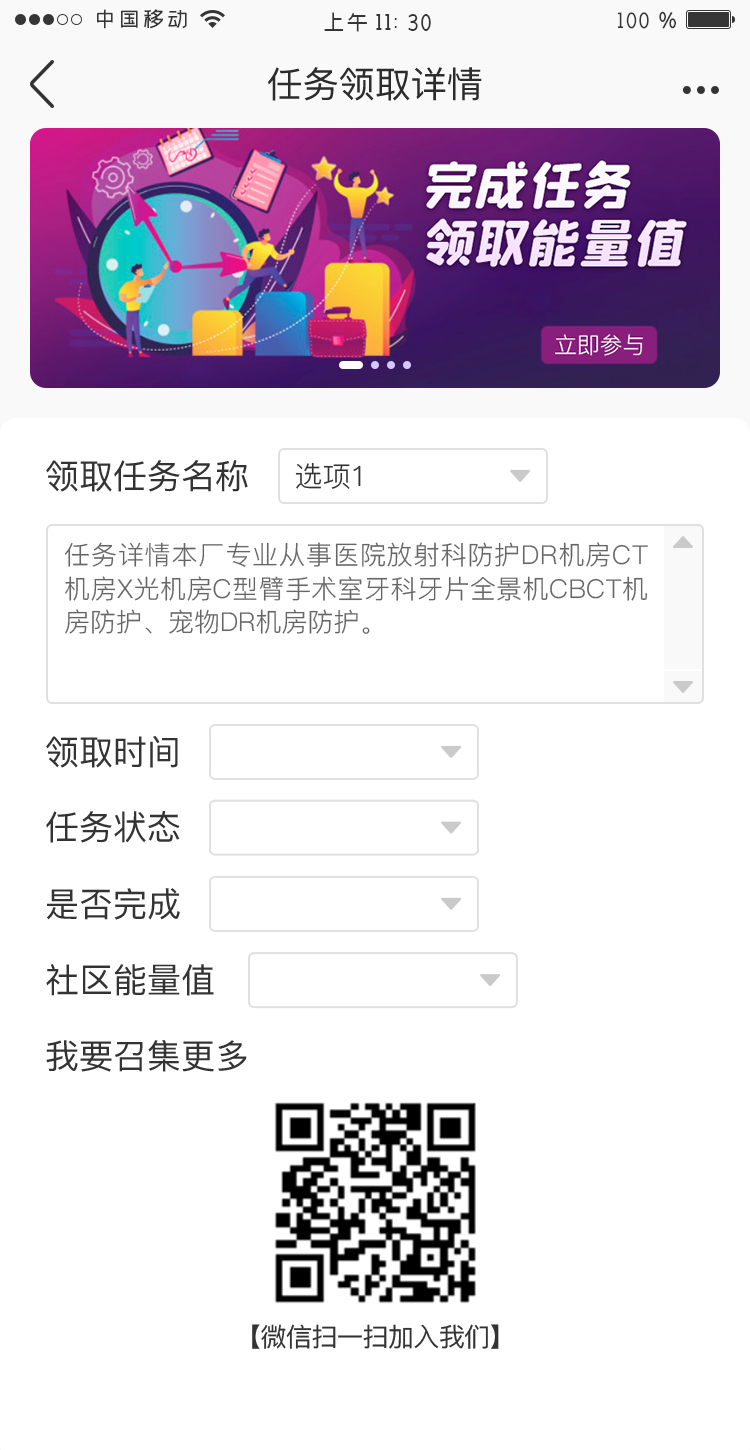
<style>
.page{position:relative;width:750px;height:1450px;background:#ffffff}
.page>*{position:absolute;margin:0}
.t1{font:36px "PingFang-SC-Medium";color:#2c2c2c;text-transform:uppercase}
.t2{font:34px "PingFang-SC-Medium";color:#333333}
.t3{font:28px "PingFang-SC-Regular";color:#333333}
.t4{font:26px/33.6px "PingFang-SC-Regular";color:#666666}
.t5{font:26px "PingFang-SC-Medium";letter-spacing:-0.02em;color:#333333}
</style>
<div class="page">
<p class="t1" style="left:268px;top:67px;width:214px;height:34px">任务领取详情</p>
<p class="t2" style="left:46px;top:460px;width:202px;height:32px">领取任务名称</p>
<p class="t3" style="left:295px;top:462px;width:66px;height:27px">选项1</p>
<p class="t4" style="left:65px;top:542px;width:583px;height:92px;text-align:justify">任务详情本厂专业从事医院放射科防护DR机房CT机房X光机房C型臂手术室牙科牙片全景机CBCT机房防护、宠物DR机房防护。</p>
<p class="t2" style="left:46px;top:736px;width:132px;height:32px">领取时间</p>
<p class="t2" style="left:46px;top:811px;width:134px;height:32px">任务状态</p>
<p class="t2" style="left:47px;top:888px;width:133px;height:32px">是否完成</p>
<p class="t2" style="left:46px;top:964px;width:168px;height:32px">社区能量值</p>
<p class="t2" style="left:46px;top:1040px;width:201px;height:32px">我要召集更多</p>
<p class="t5" style="left:252px;top:1324px;width:247px;height:25px">【微信扫一扫加入我们】</p>
</div>
